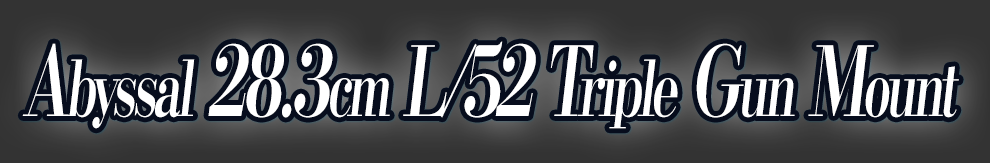
<style>
.page{position:relative;width:990px;height:163px}
.page>*{position:absolute;margin:0}
.t1{font:76.8px "KochoStd-Heavy";letter-spacing:-0.08em;color:#ffffff;font-style:italic;scale:0.66 1}
.t2{font:96px "KochoStd-Heavy";letter-spacing:-0.08em;color:#ffffff;font-style:italic;scale:0.66 1}
</style>
<div class="page">
<p class="t1" style="left:22px;top:41px;width:937px;height:88px"><span class="t2">A</span>byssal<span class="t2"> 28.3</span>cm<span class="t2"> L/52 T</span>riple<span class="t2"> G</span>un<span class="t2"> M</span>ount</p>
</div>
